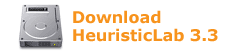
<style>
.page{position:relative;width:250px;height:55px;background:#ffffff}
.page>*{position:absolute;margin:0}
.t1{font:16px/18px "Verdana-Bold";color:#f7931d}
</style>
<div class="page">
<p class="t1" style="left:73px;top:10px;width:145px;height:32px">Download<br>HeuristicLab 3.3</p>
</div>
